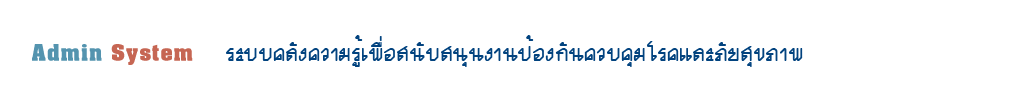
<style>
.page{position:relative;width:1024px;height:102px;background:#ffffff}
.page>*{position:absolute;margin:0}
.t1{font:32px "DSEModern";color:#02437f}
</style>
<div class="page">
<p class="t1" style="left:226px;top:35px;width:577px;height:32px">ระบบคลังความรู้เพื่อสนับสนุนงานป้องกันควบคุมโรคและภัยสุขภาพ</p>
</div>
